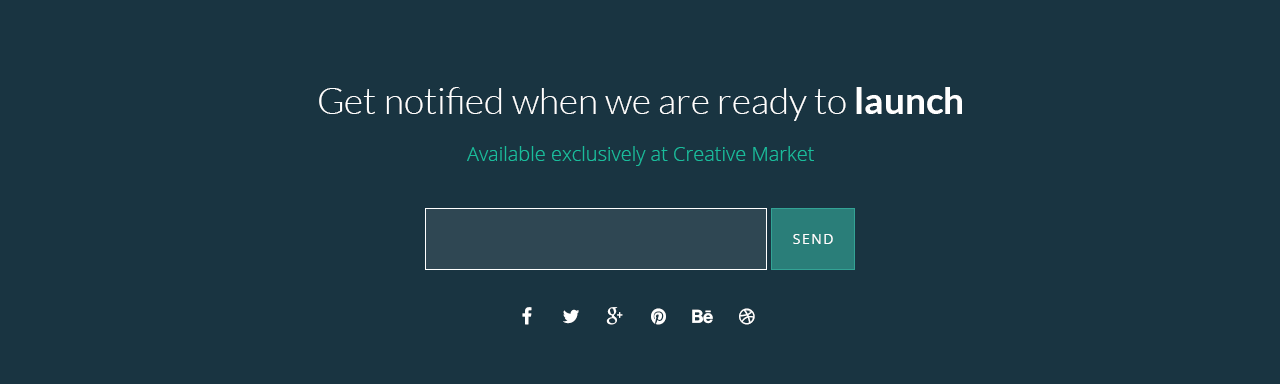
<style>
.page{position:relative;width:1280px;height:384px;background:#193441}
.page>*{position:absolute;margin:0}
.t1{font:37px "Lato-Light";color:#ffffff}
.t2{font:37px "Lato-Bold";color:#ffffff}
.t3{font:20px "OpenSans-Light";color:#1abc9c}
.t4{font:14px "OpenSans";letter-spacing:0.11em;color:#ffffff}
</style>
<div class="page">
<p class="t1" style="left:319px;top:87px;width:643px;height:34px">Get notified when we are ready to <span class="t2">launch</span></p>
<p class="t3" style="left:467px;top:146px;width:347px;height:20px">Available exclusively at Creative Market</p>
<p class="t4" style="left:793px;top:234px;width:40px;height:10px">SEND</p>
</div>
